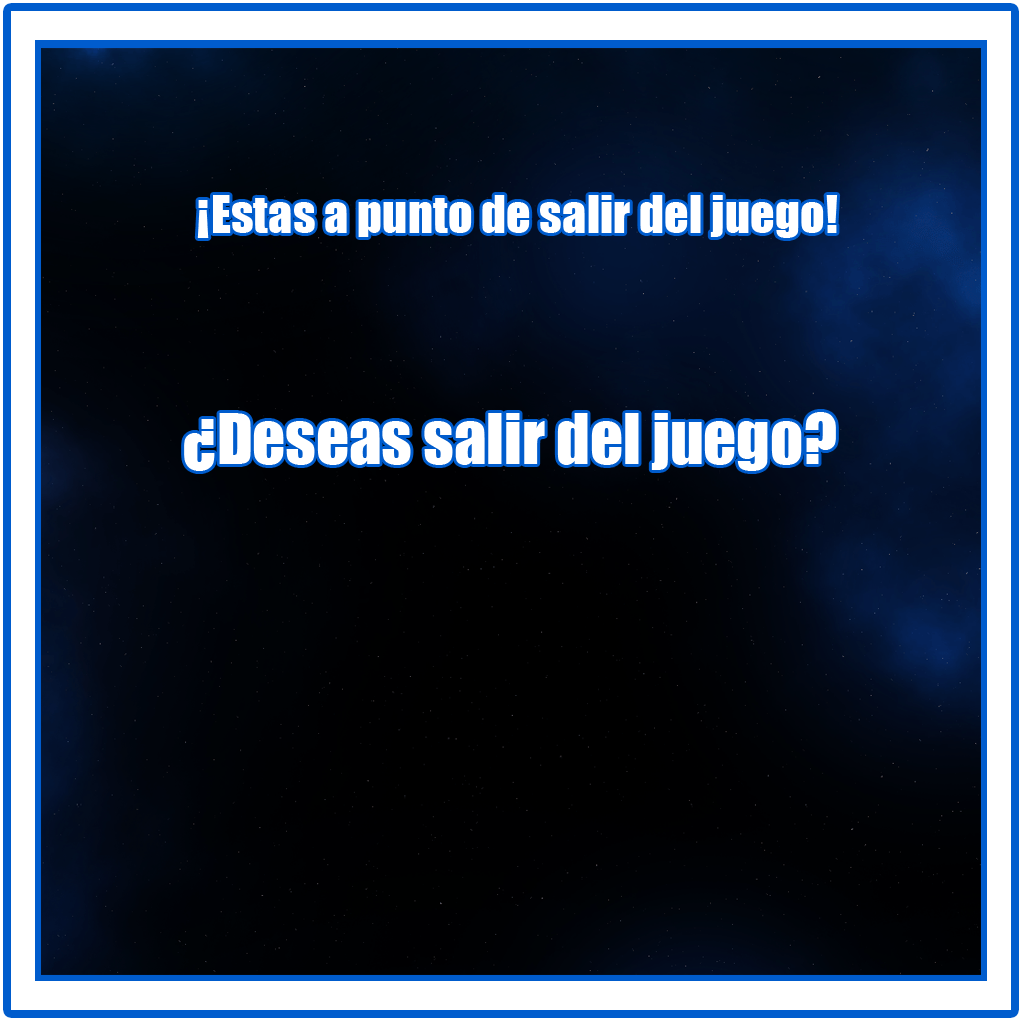
<style>
.page{position:relative;width:1024px;height:1024px}
.page>*{position:absolute;margin:0}
.t1{font:48.5px "Impact";color:#ffffff}
.t2{font:64.6px "Impact";color:#ffffff}
</style>
<div class="page">
<p class="t1" style="left:197px;top:195px;width:641px;height:43px">¡Estas a punto de salir del juego!</p>
<p class="t2" style="left:184px;top:412px;width:652px;height:59px">¿Deseas salir del juego?</p>
</div>
